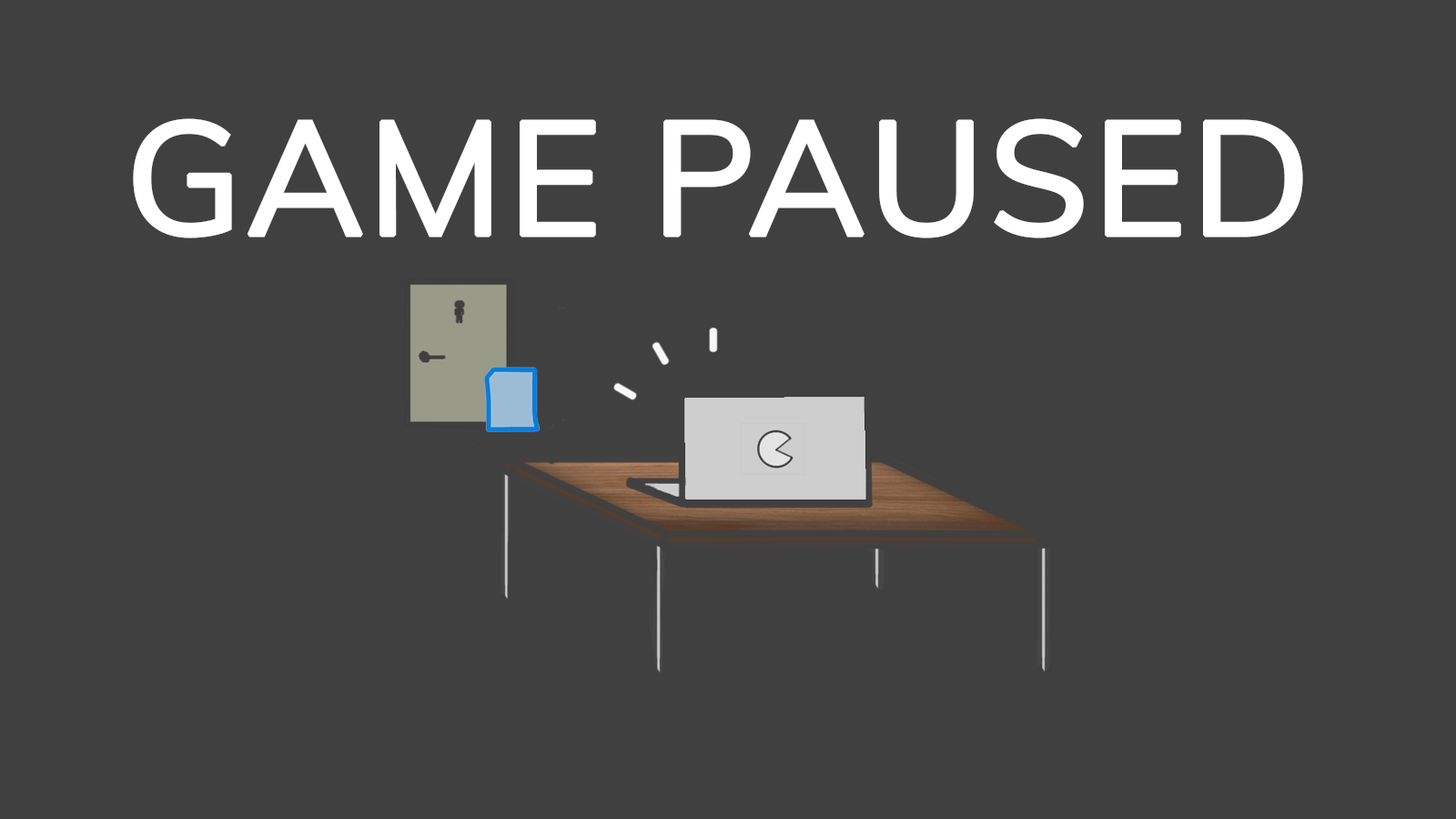
<style>
.page{position:relative;width:1456px;height:819px;background:#404040}
.page>*{position:absolute;margin:0}
.t1{font:159.5px "Muli-Regular";color:#ffffff;font-weight:bold}
</style>
<div class="page">
<p class="t1" style="left:133px;top:118px;width:1170px;height:120px">GAME PAUSED</p>
</div>
